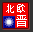
<style>
.page{position:relative;width:33px;height:32px;background:#f20000}
.page>*{position:absolute;margin:0}
.t1{font:10.4px "SimSun";color:#ffffff}
.t2{font:11.7px "SimSun";color:#ffffff}
</style>
<div class="page">
<p class="t1" style="left:6px;top:4px;width:19px;height:9px">北欧</p>
<p class="t2" style="left:16px;top:15px;width:11px;height:12px">晋</p>
</div>
